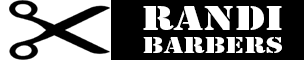
<style>
.page{position:relative;width:304px;height:60px;background:#000000}
.page>*{position:absolute;margin:0}
.t1{font:31.9px "StencilStd";color:#ffffff;scale:1.32 1}
.t2{font:21.3px "StencilStd";color:#ffffff;scale:1.3 1}
</style>
<div class="page">
<p class="t1" style="left:143px;top:6px;width:139px;height:24px">RANDI</p>
<p class="t2" style="left:143px;top:37px;width:139px;height:16px">BARBERS</p>
</div>
